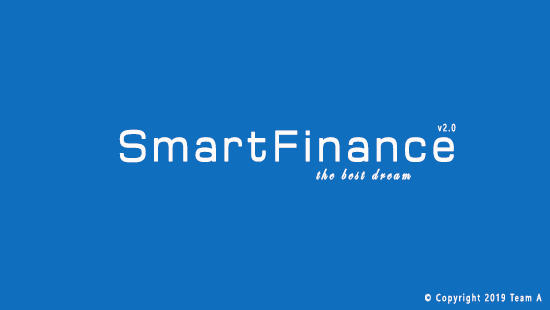
<style>
.page{position:relative;width:550px;height:310px;background:#106ebe}
.page>*{position:absolute;margin:0}
.t1{font:10px "SegoeUISymbol";letter-spacing:0.18em;color:#fdfafa;font-weight:bold;scale:0.73 1}
.t2{font:40px "Michroma";letter-spacing:0.18em;color:#fdfafa;font-weight:bold;scale:0.73 1}
.t3{font:20px "EdwardianScriptITC";letter-spacing:0.18em;color:#fdfafa;font-weight:bold;scale:0.73 1}
</style>
<div class="page">
<p class="t1" style="left:437px;top:123px;width:19px;height:9px">v2.0</p>
<p class="t2" style="left:119px;top:129px;width:335px;height:34px">SmartFinance</p>
<p class="t3" style="left:316px;top:168px;width:95px;height:12px">the best dream</p>
<p class="t1" style="left:425px;top:293px;width:117px;height:11px">© Copyright 2019 Team A</p>
</div>
